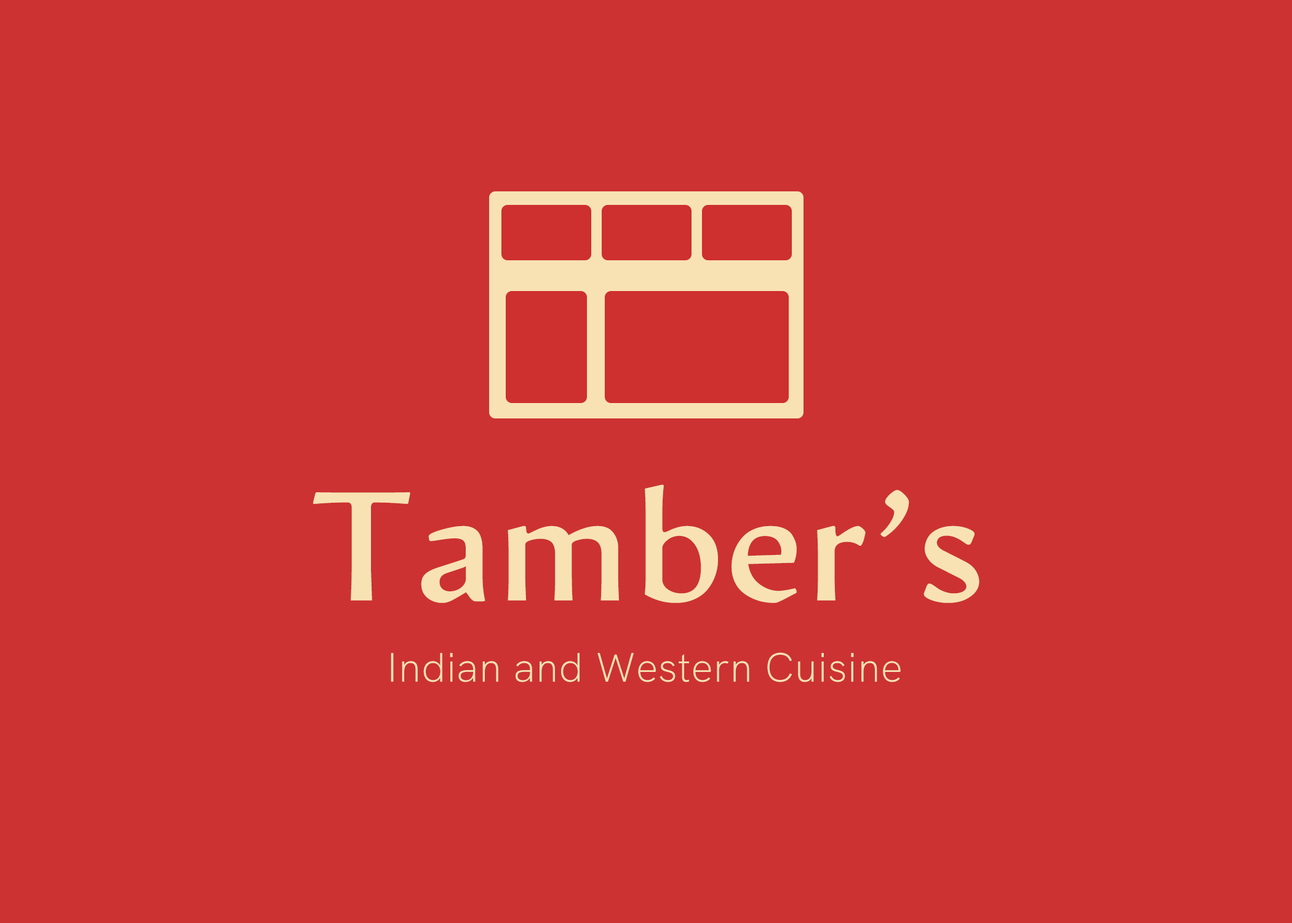
<style>
.page{position:relative;width:1292px;height:923px;background:#cc3232}
.page>*{position:absolute;margin:0}
.t1{font:153.8px "ø";color:#f8e2b3}
.t2{font:41px "HKGrotesk-Light";letter-spacing:0.01em;color:#f8e2b3}
</style>
<div class="page">
<p class="t1" style="left:313px;top:484px;width:667px;height:119px">Tamber’s</p>
<p class="t2" style="left:391px;top:652px;width:510px;height:30px">Indian and Western Cuisine</p>
</div>
